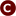
<style>
.page{position:relative;width:16px;height:16px;background:#660000}
.page>*{position:absolute;margin:0}
.t1{font:11px "Verdana-Bold";color:#ffffff}
</style>
<div class="page">
<p class="t1" style="left:3px;top:3px;width:8px;height:10px">C</p>
</div>
